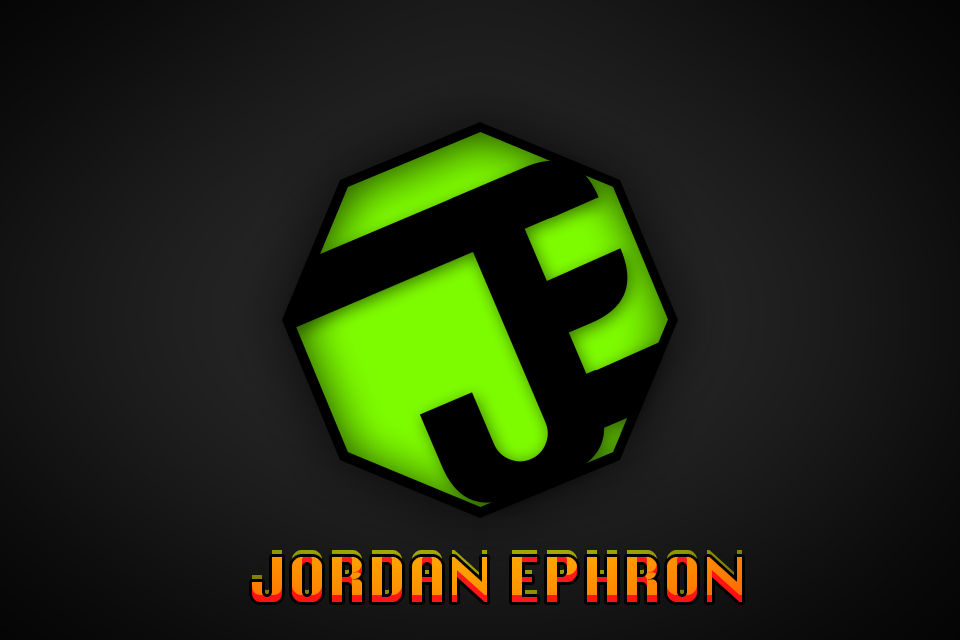
<style>
.page{position:relative;width:960px;height:640px}
.page>*{position:absolute;margin:0}
.t1{font:60px "Silom"}
</style>
<div class="page">
<p class="t1" style="left:252px;top:550px;width:490px;height:45px">JORDAN EPHRON</p>
<p class="t1" style="left:252px;top:557px;width:490px;height:45px">JORDAN EPHRON</p>
</div>
